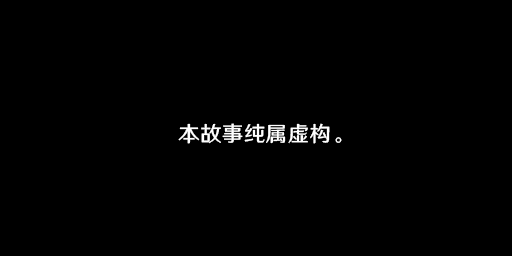
<style>
.page{position:relative;width:512px;height:256px;background:#000000}
.page>*{position:absolute;margin:0}
.t1{font:21.3px "HYWenHei-FEW";letter-spacing:0.025em;color:#ffffff}
</style>
<div class="page">
<p class="t1" style="left:178px;top:123px;width:164px;height:21px">本故事纯属虚构。</p>
</div>
